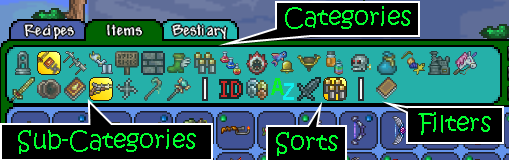
<style>
.page{position:relative;width:509px;height:160px;background:#000000}
.page>*{position:absolute;margin:0}
.t1{font:24px "KristenITC-Regular";color:#00ff2e}
</style>
<div class="page">
<p class="t1" style="left:285px;top:6px;width:126px;height:23px">Categories</p>
<p class="t1" style="left:418px;top:112px;width:73px;height:23px">Filters</p>
<p class="t1" style="left:18px;top:129px;width:178px;height:25px">Sub-Categories</p>
<p class="t1" style="left:276px;top:132px;width:62px;height:24px">Sorts<br><br>bv</p>
</div>
